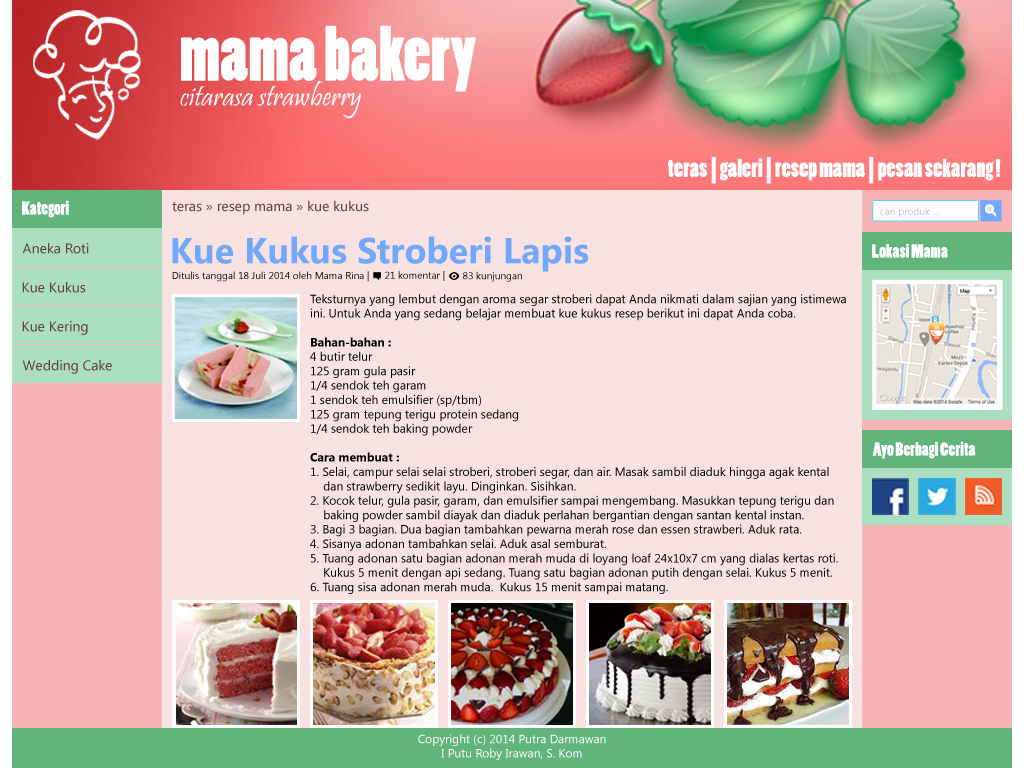
<style>
.page{position:relative;width:1024px;height:768px;background:#f8e1e1}
.page>*{position:absolute;margin:0}
.t1{font:72px "PoplarStd";color:#ffffff}
.t2{font:30px "Pristina-Regular";color:#ffffff}
.t3{font:24px "PoplarStd";color:#ffffff}
.t4{font:18px "PoplarStd";color:#ffffff}
.t5{font:14px "SegoeUI";color:#624141}
.t6{font:10px "SegoeUI";color:#b6b6b6}
.t7{font:36px "SegoeUI-Bold";color:#72a8f9}
.t8{font:10px "SegoeUI";color:#000000}
.t9{font:10px "SegoeUI"}
.t10{font:12px "SegoeUI";color:#000000}
.t11{font:12px "SegoeUI-Bold";color:#000000}
.t12{font:12px "SegoeUI";color:#ffffff}
.t13{font:1px "SegoeUI";color:#ffffff}
</style>
<div class="page">
<p class="t1" style="left:181px;top:25px;width:295px;height:67px">mama bakery</p>
<p class="t2" style="left:180px;top:80px;width:181px;height:39px">citarasa strawberry</p>
<p class="t3" style="left:668px;top:157px;width:333px;height:27px">teras | galeri | resep mama | pesan sekarang !</p>
<p class="t4" style="left:22px;top:200px;width:47px;height:18px">Kategori</p>
<p class="t5" style="left:172px;top:200px;width:197px;height:15px">teras » resep mama » kue kukus</p>
<p class="t6" style="left:880px;top:207px;width:59px;height:10px">cari produk ...</p>
<p class="t5" style="left:22px;top:243px;width:67px;height:11px">Aneka Roti</p>
<p class="t7" style="left:172px;top:236px;width:417px;height:36px">Kue Kukus Stroberi Lapis</p>
<p class="t4" style="left:872px;top:243px;width:76px;height:15px">Lokasi Mama</p>
<p class="t8" style="left:172px;top:271px;width:197px;height:11px">Ditulis tanggal 18 Juli 2014 oleh Mama Rina |</p>
<p class="t9" style="left:385px;top:271px;width:60px;height:10px">21 komentar |</p>
<p class="t9" style="left:463px;top:271px;width:59px;height:11px">83 kunjungan</p>
<p class="t5" style="left:22px;top:282px;width:64px;height:11px">Kue Kukus</p>
<p class="t10" style="left:310px;top:294px;width:536px;height:300px">Teksturnya yang lembut dengan aroma segar stroberi dapat Anda nikmati dalam sajian yang istimewa<br>ini. Untuk Anda yang sedang belajar membuat kue kukus resep berikut ini dapat Anda coba.<br><br><span class="t11">Bahan-bahan :</span><br>4 butir telur<br>125 gram gula pasir<br>1/4 sendok teh garam<br>1 sendok teh emulsifier (sp/tbm)<br>125 gram tepung terigu protein sedang<br>1/4 sendok teh baking powder<br><br><span class="t11">Cara membuat :<br></span>1. Selai, campur selai selai stroberi, stroberi segar, dan air. Masak sambil diaduk hingga agak kental<br>    dan strawberry sedikit layu. Dinginkan. Sisihkan.<br>2. Kocok telur, gula pasir, garam, dan emulsifier sampai mengembang. Masukkan tepung terigu dan<br>    baking powder sambil diayak dan diaduk perlahan bergantian dengan santan kental instan.<br>3. Bagi 3 bagian. Dua bagian tambahkan pewarna merah rose dan essen strawberi. Aduk rata.<br>4. Sisanya adonan tambahkan selai. Aduk asal semburat.<br>5. Tuang adonan satu bagian adonan merah muda di loyang loaf 24x10x7 cm yang dialas kertas roti.<br>    Kukus 5 menit dengan api sedang. Tuang satu bagian adonan putih dengan selai. Kukus 5 menit.<br>6. Tuang sisa adonan merah muda.  Kukus 15 menit sampai matang.</p>
<p class="t5" style="left:22px;top:321px;width:66px;height:14px">Kue Kering</p>
<p class="t5" style="left:22px;top:360px;width:90px;height:14px">Wedding Cake</p>
<p class="t4" style="left:872px;top:441px;width:104px;height:18px">Ayo Berbagi Cerita</p>
<p class="t12" style="left:418px;top:734px;width:188px;height:27px;text-align:center"><span class="t13"><br></span>Copyright (c) 2014 Putra Darmawan<br>I Putu Roby Irawan, S. Kom</p>
</div>
